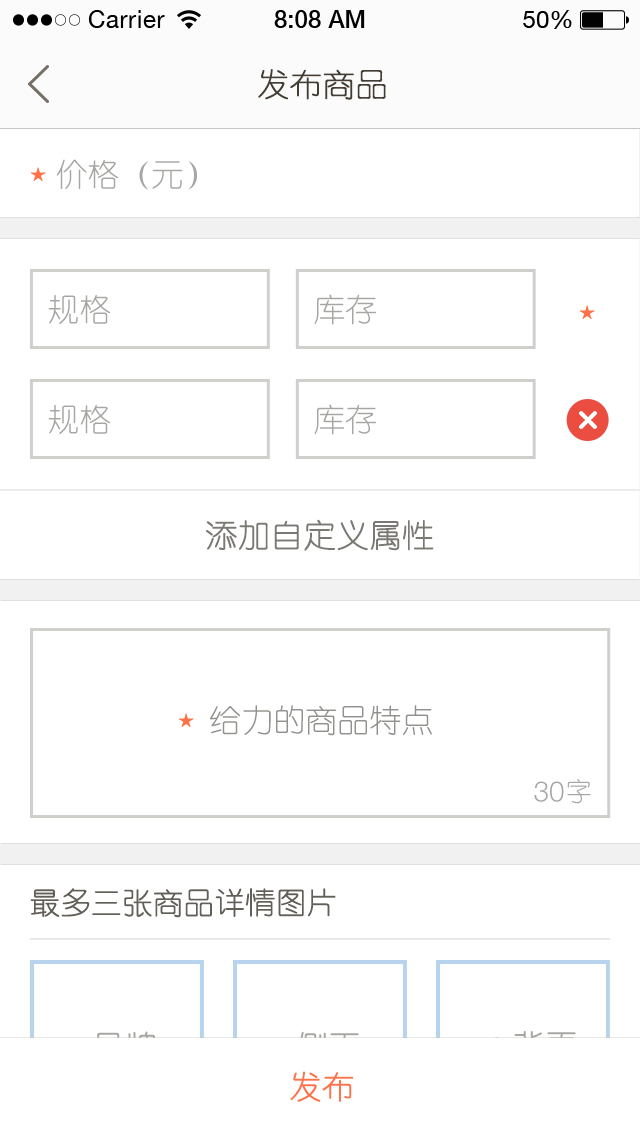
<style>
.page{position:relative;width:640px;height:1136px;background:#ffffff}
.page>*{position:absolute;margin:0}
.t1{font:32px "YouYuan";color:#433d33;text-transform:uppercase;font-weight:bold}
.t2{font:32px "YouYuan";color:#a7a6a3;text-transform:uppercase}
.t3{font:32px "YouYuan";color:#7b7973;text-transform:uppercase;font-weight:bold}
.t4{font:32px "YouYuan";color:#93918d;text-transform:uppercase}
.t5{font:28px "HelveticaNeueLTPro-Lt";color:#a7a6a3;text-transform:uppercase}
.t6{font:26px "YouYuan";color:#a7a6a3;text-transform:uppercase}
.t7{font:30px "YouYuan";color:#625e58;text-transform:uppercase;font-weight:bold}
.t8{font:32px "YouYuan";color:#ff7248;text-transform:uppercase;font-weight:bold}
</style>
<div class="page">
<p class="t1" style="left:258px;top:69px;width:128px;height:31px">发布商品</p>
<p class="t2" style="left:56px;top:159px;width:141px;height:31px">价格（元）</p>
<p class="t2" style="left:314px;top:294px;width:62px;height:31px">库存</p>
<p class="t2" style="left:48px;top:295px;width:63px;height:29px">规格</p>
<p class="t2" style="left:48px;top:405px;width:63px;height:29px">规格</p>
<p class="t2" style="left:314px;top:404px;width:62px;height:31px">库存</p>
<p class="t3" style="left:206px;top:519px;width:228px;height:32px">添加自定义属性</p>
<p class="t4" style="left:210px;top:705px;width:222px;height:31px">给力的商品特点</p>
<p class="t5" style="left:534px;top:781px;width:30px;height:21px">30</p>
<p class="t6" style="left:567px;top:779px;width:24px;height:25px">字</p>
<p class="t7" style="left:30px;top:888px;width:306px;height:30px">最多三张商品详情图片</p>
<p class="t8" style="left:290px;top:1071px;width:64px;height:31px">发布</p>
</div>
